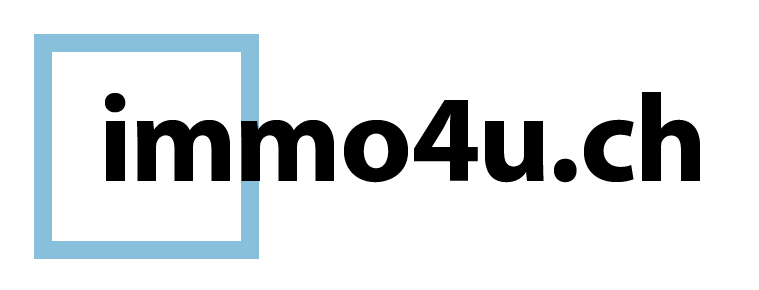
<style>
.page{position:relative;width:759px;height:290px;background:#ffffff}
.page>*{position:absolute;margin:0}
.t1{font:125px "MyriadHebrew-Bold";color:#000000}
</style>
<div class="page">
<p class="t1" style="left:105px;top:92px;width:595px;height:91px">immo4u.ch</p>
</div>
